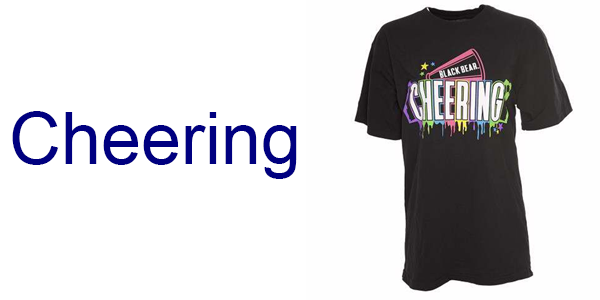
<style>
.page{position:relative;width:600px;height:300px;background:#ffffff}
.page>*{position:absolute;margin:0}
.t1{font:72px "ArialMT";color:#000080}
</style>
<div class="page">
<p class="t1" style="left:12px;top:111px;width:285px;height:68px">Cheering</p>
</div>
